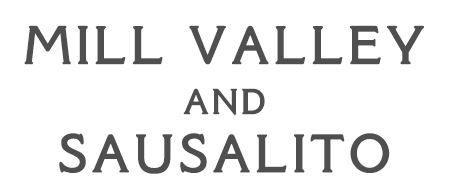
<style>
.page{position:relative;width:450px;height:195px;background:#ffffff}
.page>*{position:absolute;margin:0}
.t1{font:56.2px/58.3px "SilentinaFilm";letter-spacing:0.05em;color:#4f4f4f;font-weight:bold;scale:1.11 1}
.t2{font:37.5px/50px "SilentinaFilm";letter-spacing:0.05em;color:#4f4f4f;font-weight:bold;scale:1.11 1}
</style>
<div class="page">
<p class="t1" style="left:24px;top:25px;width:400px;height:149px;text-align:center">MILL VALLEY<br><span class="t2">AND<br></span>SAUSALITO</p>
</div>
